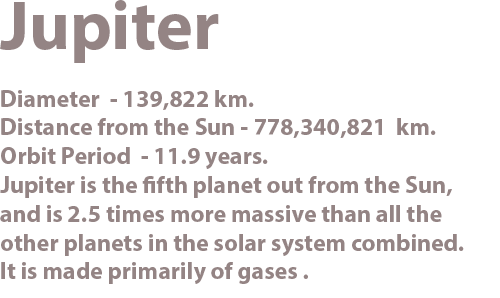
<style>
.page{position:relative;width:500px;height:298px;background:#ffffff}
.page>*{position:absolute;margin:0}
.t1{font:24px "MyriadHebrew-Bold";color:#887777}
.t2{font:70px "MyriadHebrew-Bold";color:#887777}
</style>
<div class="page">
<p class="t1" style="left:0px;top:0px;width:464px;height:284px;text-align:right;opacity:0.9"><span class="t2">Jupiter<br></span><br>Diameter  - 139,822 km.<br>Distance from the Sun - 778,340,821  km.<br>Orbit Period  - 11.9 years.<br>Jupiter is the fifth planet out from the Sun,<br>and is 2.5 times more massive than all the<br>other planets in the solar system combined.<br>It is made primarily of gases .</p>
</div>
